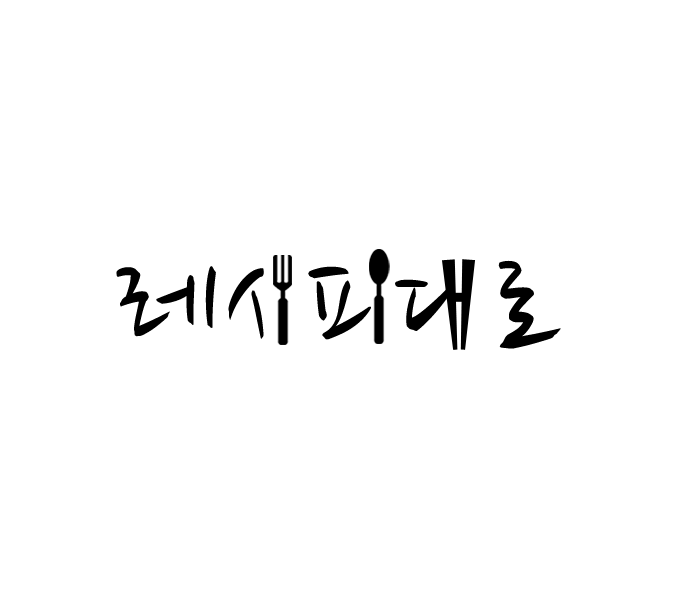
<style>
.page{position:relative;width:700px;height:600px;background:#ffffff}
.page>*{position:absolute;margin:0}
.t1{font:140px "NanumBrush";color:#000000}
</style>
<div class="page">
<p class="t1" style="left:116px;top:260px;width:445px;height:89px">레시피대로</p>
</div>
